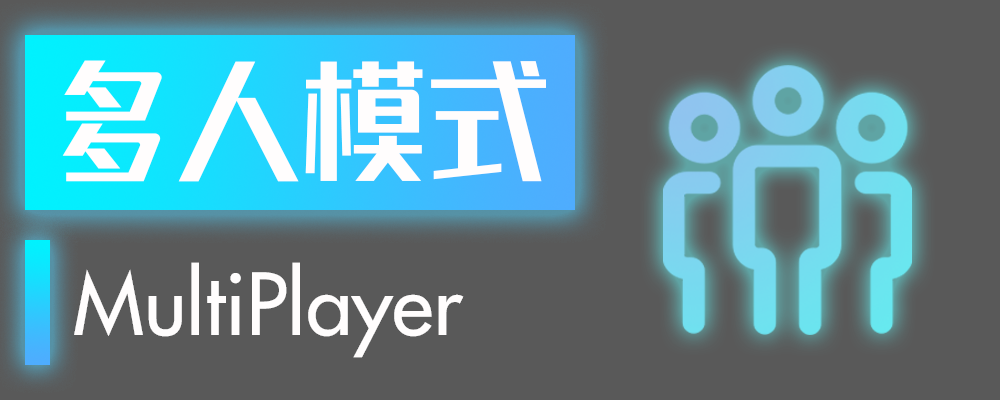
<style>
.page{position:relative;width:1000px;height:400px;background:#595959}
.page>*{position:absolute;margin:0}
.t1{font:125px "REEJIZhenyanGB20GX-Medium";color:#fffdfd}
.t2{font:83.3px "Futura-Medium";color:#fffdfd}
</style>
<div class="page">
<p class="t1" style="left:62px;top:60px;width:484px;height:122px">多人模式</p>
<p class="t2" style="left:74px;top:262px;width:390px;height:96px">MultiPlayer</p>
</div>
